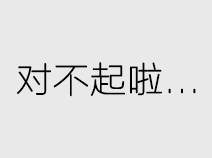
<style>
.page{position:relative;width:212px;height:158px;background:#e9e9e9}
.page>*{position:absolute;margin:0}
.t1{font:36px "FZLTCXHJW--GB1-0";color:#000000;font-weight:bold}
</style>
<div class="page">
<p class="t1" style="left:16px;top:62px;width:180px;height:35px">对不起啦...</p>
</div>
